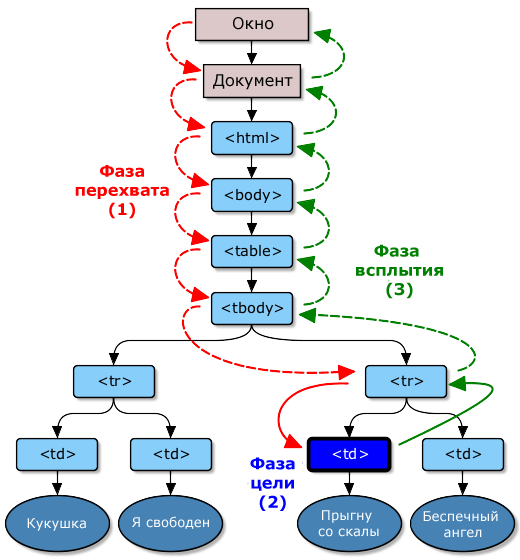
<style>
.page{position:relative;width:520px;height:560px;background:#ffffff}
.page>*{position:absolute;margin:0}
.t1{font:16px "Verdana";color:#030303}
.t2{font:16px "Verdana-Bold";color:#ff0000}
.t3{font:16px "Verdana-Bold";color:#008000}
.t4{font:16px "Verdana-Bold";color:#0000ff}
.t5{font:13.3px "Verdana";color:#ffffff}
</style>
<div class="page">
<p class="t1" style="left:233px;top:17px;width:41px;height:13px">Окно</p>
<p class="t1" style="left:213px;top:74px;width:80px;height:16px">Документ</p>
<p class="t2" style="left:75px;top:165px;width:94px;height:54px;text-align:center">Фаза<br>перехвата<br>(1)</p>
<p class="t3" style="left:356px;top:244px;width:87px;height:55px;text-align:center">Фаза <br>всплытия<br>(3)</p>
<p class="t4" style="left:250px;top:457px;width:45px;height:54px;text-align:center">Фаза<br>цели<br>(2)</p>
<p class="t5" style="left:318px;top:510px;width:61px;height:27px;text-align:center">Прыгну <br>со скалы</p>
<p class="t5" style="left:27px;top:518px;width:59px;height:13px">Кукушка</p>
<p class="t5" style="left:132px;top:516px;width:77px;height:13px">Я свободен</p>
<p class="t5" style="left:423px;top:511px;width:75px;height:27px;text-align:center">Беспечный <br>ангел</p>
</div>
